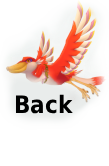
<style>
.page{position:relative;width:109px;height:166px;background:#ffffff}
.page>*{position:absolute;margin:0}
.t1{font:24px "DejaVuSansCondensed-Bold";color:#000000}
</style>
<div class="page">
<p class="t1" style="left:15px;top:94px;width:58px;height:20px">Back</p>
</div>
